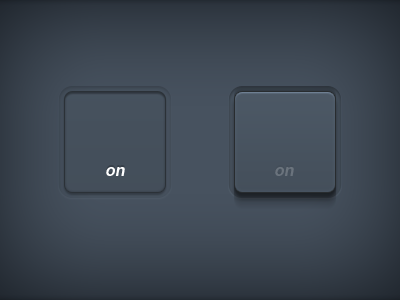
<style>
.page{position:relative;width:400px;height:300px}
.page>*{position:absolute;margin:0}
.t1{font:16px "HelveticaNeue-Bold";color:#ffffff;font-style:italic}
.t2{font:16px "HelveticaNeue-Bold";color:#6b737d;font-style:italic}
</style>
<div class="page">
<p class="t1" style="left:106px;top:167px;width:19px;height:9px">on</p>
<p class="t2" style="left:275px;top:167px;width:19px;height:9px">on</p>
</div>
